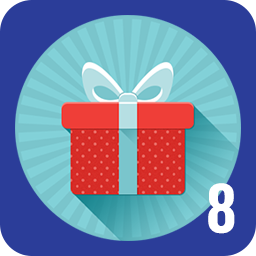
<style>
.page{position:relative;width:256px;height:256px;background:#2b3d99}
.page>*{position:absolute;margin:0}
.t1{font:56.9px "FjallaOne-Regular";letter-spacing:-0.03em;color:#ffffff;text-transform:uppercase;font-weight:bold}
</style>
<div class="page">
<p class="t1" style="left:208px;top:183px;width:27px;height:51px">8</p>
</div>
